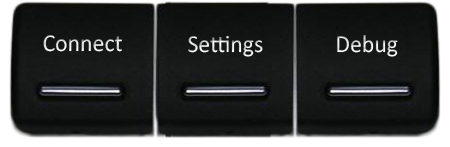
<style>
.page{position:relative;width:450px;height:147px}
.page>*{position:absolute;margin:0}
.t1{font:24.8px "Calibri";scale:0.96 1}
</style>
<div class="page">
<p class="t1" style="left:43px;top:35px;width:79px;height:17px">Connect</p>
<p class="t1" style="left:188px;top:35px;width:75px;height:22px">Settings</p>
<p class="t1" style="left:337px;top:35px;width:61px;height:22px">Debug</p>
</div>
